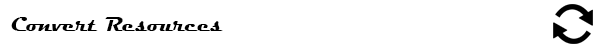
<style>
.page{position:relative;width:600px;height:50px;background:#ffffff}
.page>*{position:absolute;margin:0}
.t1{font:20.8px "Magneto-Bold";color:#000000}
</style>
<div class="page">
<p class="t1" style="left:11px;top:17px;width:212px;height:14px">Convert Resources</p>
</div>
